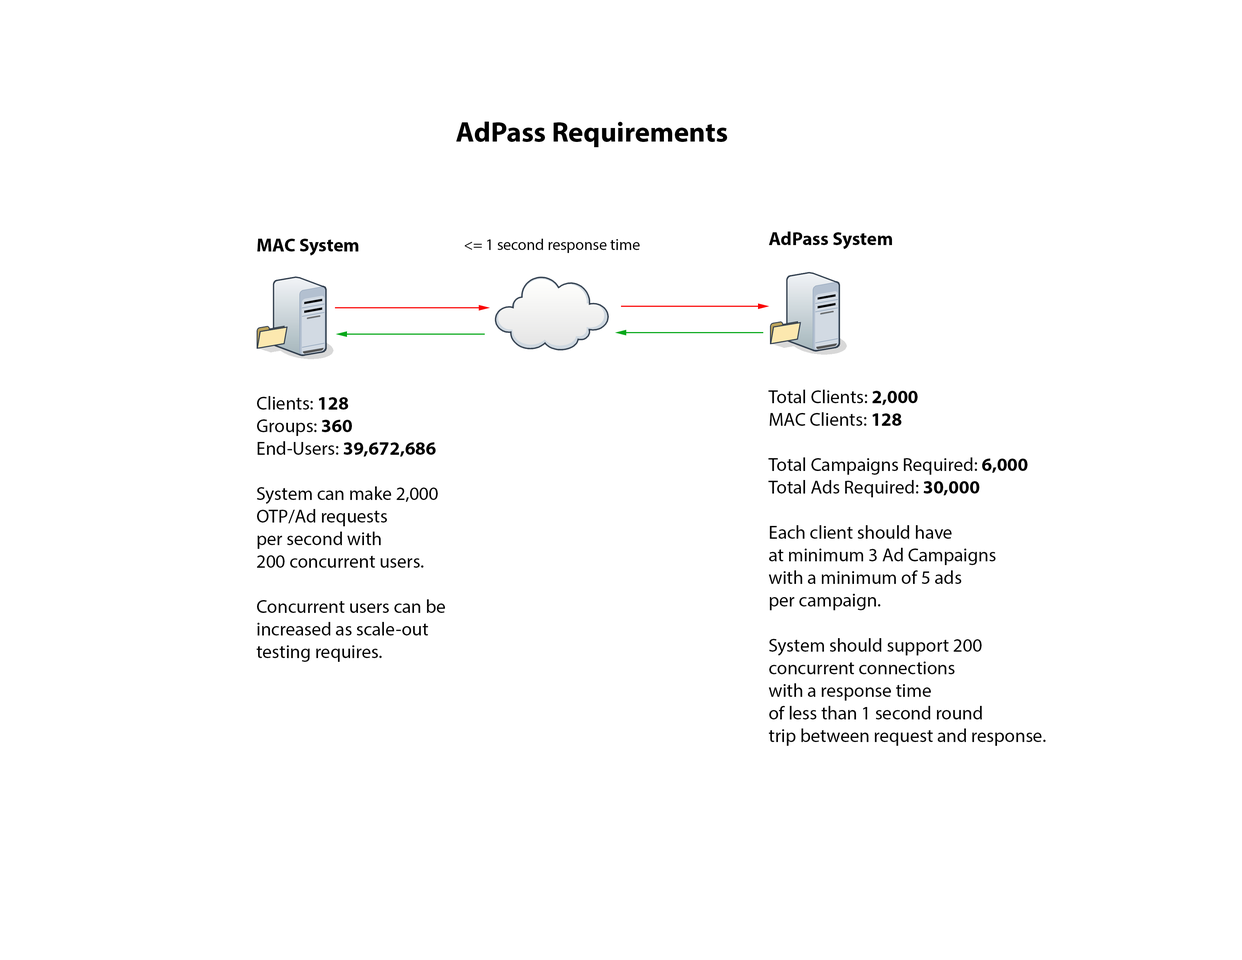
<style>
.page{position:relative;width:1242px;height:960px;background:#ffffff}
.page>*{position:absolute;margin:0}
.t1{font:28.2px "MyriadPro-Bold";color:#000000}
.t2{font:18.8px "MyriadPro-Regular";color:#000000}
.t3{font:18.8px "MyriadPro-Bold";color:#000000}
.t4{font:15.7px "MyriadPro-Regular";color:#000000}
</style>
<div class="page">
<p class="t1" style="left:456px;top:122px;width:271px;height:25px">AdPass Requirements</p>
<p class="t2" style="left:768px;top:232px;width:278px;height:514px"><span class="t3">AdPass System<br><br><br><br><br><br><br></span>Total Clients: <span class="t3">2,000<br></span>MAC Clients: <span class="t3">128<br></span><br>Total Campaigns Required: <span class="t3">6,000<br></span>Total Ads Required: <span class="t3">30,000<br></span><br>Each client should have<br>at minimum 3 Ad Campaigns<br>with a minimum of 5 ads <br>per campaign.<br><br>System should support 200 <br>concurrent connections<br>with a response time<br>of less than 1 second round <br>trip between request and response.</p>
<p class="t2" style="left:257px;top:239px;width:188px;height:423px"><span class="t3">MAC System<br><br><br><br><br><br><br></span>Clients: <span class="t3">128<br></span>Groups: <span class="t3">360<br></span>End-Users: <span class="t3">39,672,686<br></span><br>System can make 2,000<br>OTP/Ad requests<br>per second with <br>200 concurrent users.<br><br>Concurrent users can be<br>increased as scale-out<br>testing requires.</p>
<p class="t4" style="left:465px;top:239px;width:175px;height:14px">&lt;= 1 second response time</p>
</div>
